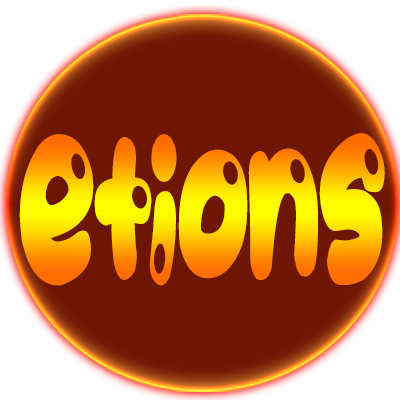
<style>
.page{position:relative;width:400px;height:400px;background:#6d1603}
.page>*{position:absolute;margin:0}
.t1{font:158.7px "JuicyFruity";scale:0.5 1}
</style>
<div class="page">
<p class="t1" style="left:19px;top:133px;width:366px;height:153px">etions</p>
</div>
